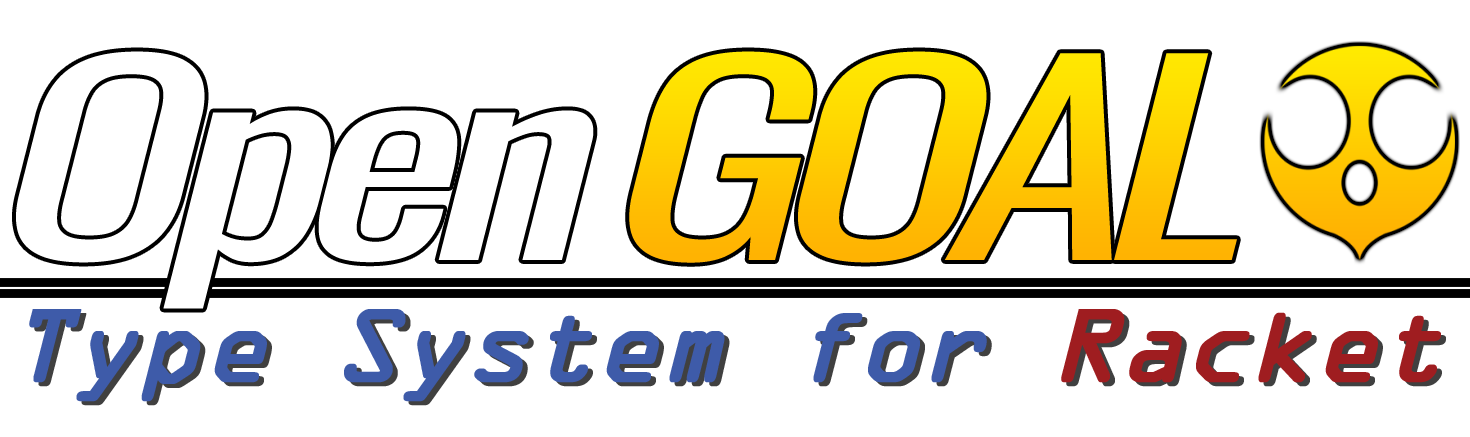
<style>
.page{position:relative;width:1470px;height:437px;background:#ffffff}
.page>*{position:absolute;margin:0}
.t1{font:255.2px "Oswald-Regular";letter-spacing:-0.075em;font-style:italic;scale:1.44 1}
.t2{font:92.5px "OCRAStd";letter-spacing:-0.04em;color:#3e5ba9;font-weight:bold;font-style:italic}
.t3{font:92.5px "OCRAStd";letter-spacing:-0.04em;color:#9f1d20;font-weight:bold;font-style:italic}
</style>
<div class="page">
<p class="t1" style="left:629px;top:51px;width:608px;height:212px">GOAL</p>
<p class="t2" style="left:29px;top:309px;width:1412px;height:93px">Type System for <span class="t3">Racket</span></p>
</div>
